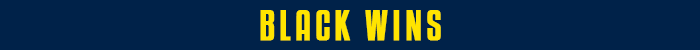
<style>
.page{position:relative;width:700px;height:50px;background:#002249}
.page>*{position:absolute;margin:0}
.t1{font:37.5px "KenyanCoffeeRg-Regular";letter-spacing:0.1em;color:#ffe400;font-weight:bold}
</style>
<div class="page">
<p class="t1" style="left:260px;top:10px;width:181px;height:31px">BLACK WINS</p>
</div>
